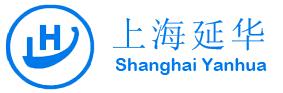
<style>
.page{position:relative;width:283px;height:93px;background:#ffffff}
.page>*{position:absolute;margin:0}
.t1{font:36px "SimSun";letter-spacing:0.1em;color:#0079ea}
.t2{font:18px "ArialRoundedMTBold";color:#0079ea}
</style>
<div class="page">
<p class="t1" style="left:112px;top:17px;width:153px;height:34px">上海延华</p>
<p class="t2" style="left:115px;top:58px;width:152px;height:17px">Shanghai Yanhua</p>
</div>
